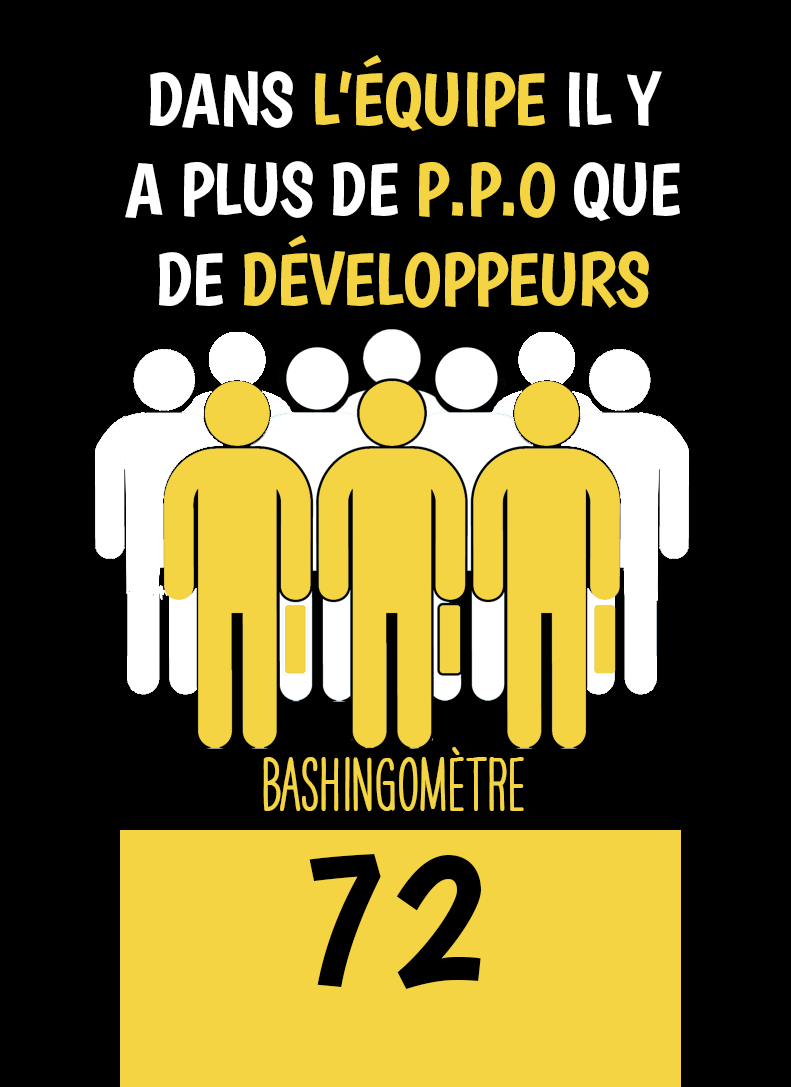
<style>
.page{position:relative;width:791px;height:1087px;background:#000000}
.page>*{position:absolute;margin:0}
.t1{font:75px "Boogaloo-Regular";letter-spacing:-0.02em;color:#ffffff}
.t2{font:75px "Boogaloo-Regular";letter-spacing:-0.02em;color:#f4d443}
.t3{font:66.7px "HAVEANICEDAYTallW04-Bold";color:#f4d443}
.t4{font:200px "Boogaloo-Regular";color:#000000}
</style>
<div class="page">
<p class="t1" style="left:125px;top:55px;width:555px;height:253px;text-align:center">DANS <span class="t2">L’ÉQUIPE</span> IL Y A PLUS DE <span class="t2">P.P.O</span> QUE DE <span class="t2">DÉVELOPPEURS</span></p>
<p class="t3" style="left:263px;top:747px;width:261px;height:64px">BASHINgomètre</p>
<p class="t4" style="left:309px;top:854px;width:172px;height:135px">72</p>
</div>
